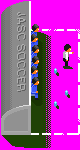
<style>
.page{position:relative;width:80px;height:150px;background:#ff00ff}
.page>*{position:absolute;margin:0}
.t1{font:10.1px "Small Fonts";letter-spacing:0.1em;color:#afafaf}
.t2{font:10.1px "Small Fonts";letter-spacing:0.1em;color:#5f5f5f}
</style>
<div class="page">
<p class="t1" style="left:17px;top:12px;width:8px;height:79px;rotate:90deg">JASC SOCCER</p>
<p class="t2" style="left:18px;top:13px;width:8px;height:79px;rotate:90deg">JASC SOCCER</p>
</div>
